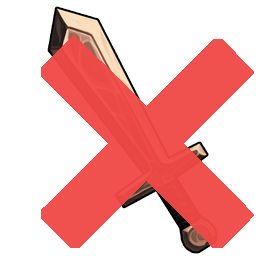
<style>
.page{position:relative;width:256px;height:256px;background:#ffffff}
.page>*{position:absolute;margin:0}
.t1{font:400px "MicrosoftYaHeiUI-Bold";color:#f04845;font-weight:bold}
</style>
<div class="page">
<p class="t1" style="left:41px;top:35px;width:213px;height:213px;opacity:0.95">×</p>
</div>
